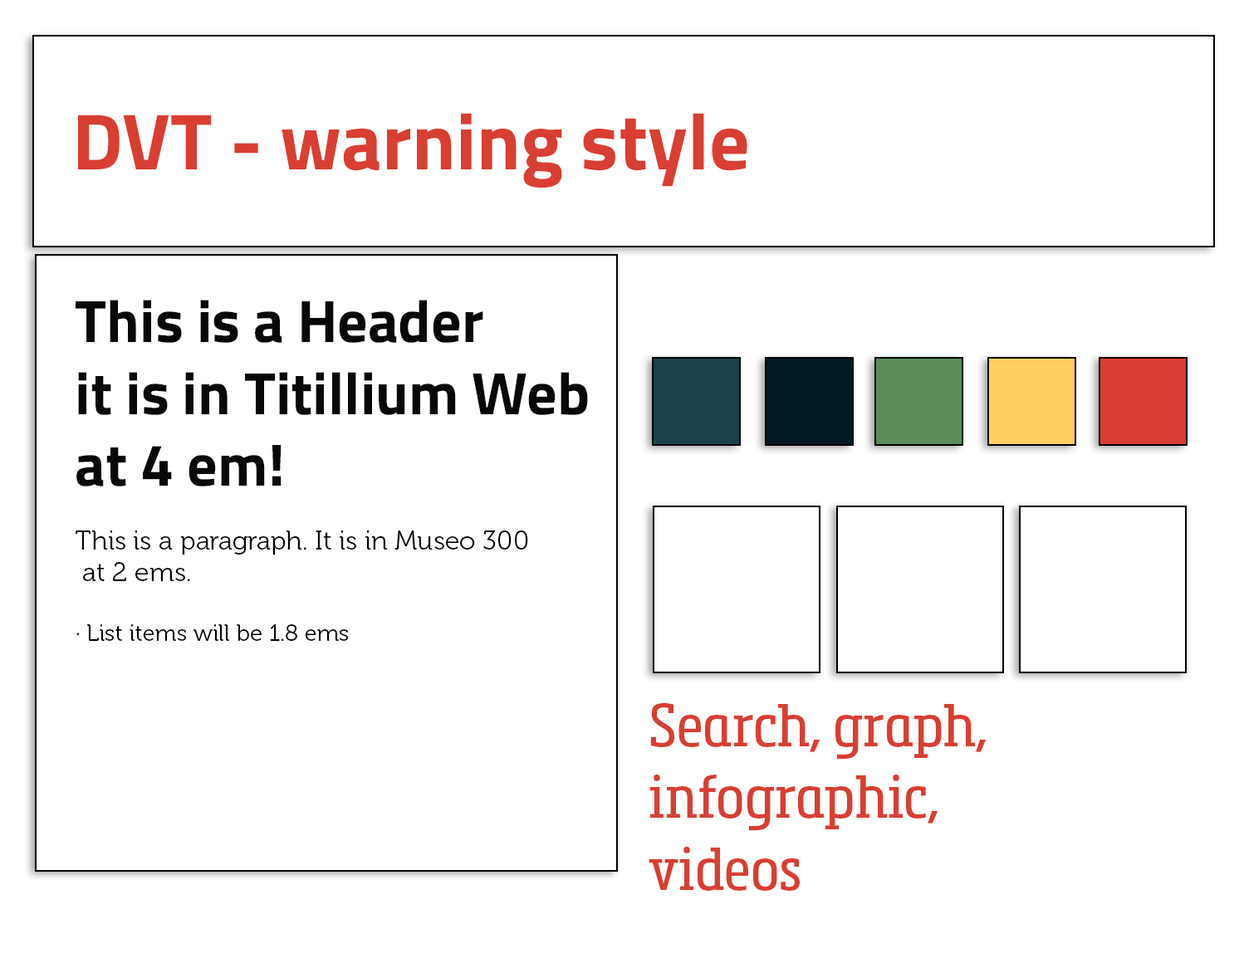
<style>
.page{position:relative;width:1244px;height:958px;background:#ffffff}
.page>*{position:absolute;margin:0}
.t1{font:79.7px "TitilliumWeb-Bold";color:#d93e32}
.t2{font:26.6px "Museo-300";color:#000000}
.t3{font:59.8px "TitilliumWeb-Bold";color:#080808}
.t4{font:23.3px "Museo-300";color:#000000}
.t5{font:59.8px "MetronicSlabNarrowRegular";color:#d93e32}
</style>
<div class="page">
<p class="t1" style="left:78px;top:113px;width:669px;height:75px">DVT - warning style</p>
<p class="t2" style="left:76px;top:300px;width:512px;height:341px"><span class="t3">This is a Header <br>it is in Titillium Web<br>at 4 em!<br><br></span>This is a paragraph. It is in Museo 300<br> at 2 ems.<br><br><span class="t4">· List items will be 1.8 ems</span></p>
<p class="t5" style="left:649px;top:703px;width:338px;height:188px">Search, graph,<br>infographic, <br>videos</p>
</div>
